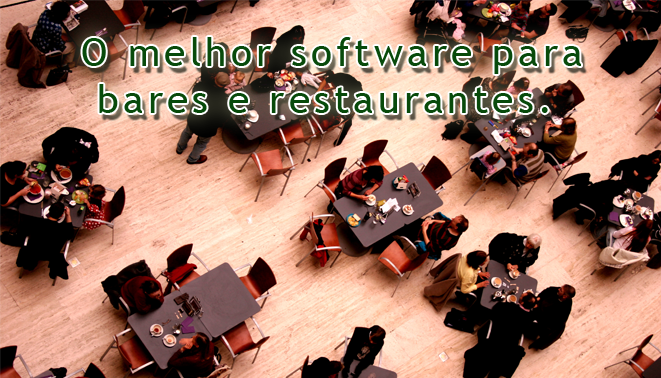
<style>
.page{position:relative;width:661px;height:378px}
.page>*{position:absolute;margin:0}
.t1{font:39.4px "TrebuchetMS";letter-spacing:0.1em;color:#084a0b}
</style>
<div class="page">
<p class="t1" style="left:82px;top:37px;width:499px;height:76px">O melhor software para<br> bares e restaurantes.</p>
</div>
